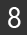
<style>
.page{position:relative;width:27px;height:35px;background:#333333}
.page>*{position:absolute;margin:0}
.t1{font:29px "SegoeUI";color:#ffffff;scale:0.93 1}
</style>
<div class="page">
<p class="t1" style="left:8px;top:7px;width:13px;height:21px">8</p>
</div>
